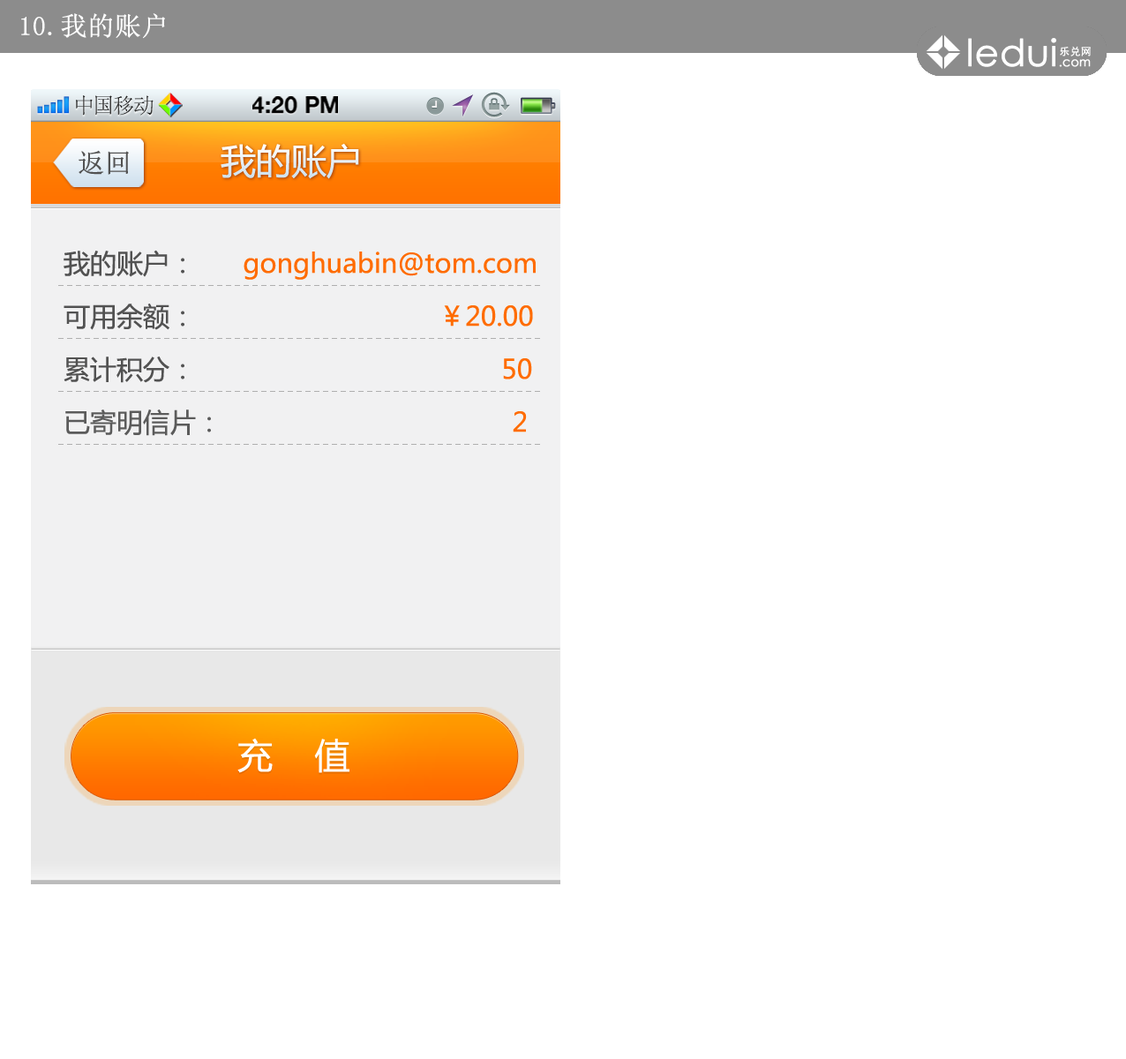
<style>
.page{position:relative;width:1126px;height:1059px;background:#ffffff}
.page>*{position:absolute;margin:0}
.t1{font:26.5px "SimSun";color:#ffffff;font-weight:bold}
.t2{font:21.5px "SimSun";color:#414141}
.t3{font:23.1px "HelveticaNeue-Bold";color:#000000;text-transform:uppercase}
.t4{font:35.3px "MicrosoftYaHei";color:#e9f1f7}
.t5{font:26.5px "SimSun";color:#525252;font-weight:bold}
.t6{font:26.5px/52.9px "MicrosoftYaHei";color:#ff6c00}
.t7{font:26.5px/52.9px "MicrosoftYaHei";color:#525252}
.t8{font:26.5px/52.9px "MicrosoftYaHei";color:#5b5b5b}
.t9{font:35.3px "MicrosoftYaHei";color:#ffffff}
</style>
<div class="page">
<p class="t1" style="left:21px;top:13px;width:144px;height:26px">10.我的账户</p>
<p class="t2" style="left:76px;top:95px;width:78px;height:21px">中国移动</p>
<p class="t3" style="left:252px;top:96px;width:86px;height:18px">4:20 PM</p>
<p class="t4" style="left:221px;top:143px;width:138px;height:36px">我的账户</p>
<p class="t5" style="left:79px;top:150px;width:50px;height:25px">返回</p>
<p class="t6" style="left:64px;top:250px;width:472px;height:186px"><span class="t7">我的账户：      </span>gonghuabin@tom.com<br><span class="t7">可用余额：                               </span>￥20.00<br><span class="t7">累计积分：                                       </span>50<br><span class="t8">已寄明信片：                                     </span>2</p>
<p class="t9" style="left:237px;top:738px;width:112px;height:35px">充    值</p>
</div>
